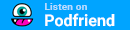
<style>
.page{position:relative;width:130px;height:30px;background:#00a4ff}
.page>*{position:absolute;margin:0}
.t1{font:10.4px "Roboto-Bold";color:#b8ddff}
.t2{font:16px "Roboto-Bold";color:#ffffff}
</style>
<div class="page">
<p class="t1" style="left:45px;top:3px;width:42px;height:7px">Listen on</p>
<p class="t2" style="left:45px;top:13px;width:70px;height:14px">Podfriend</p>
</div>
